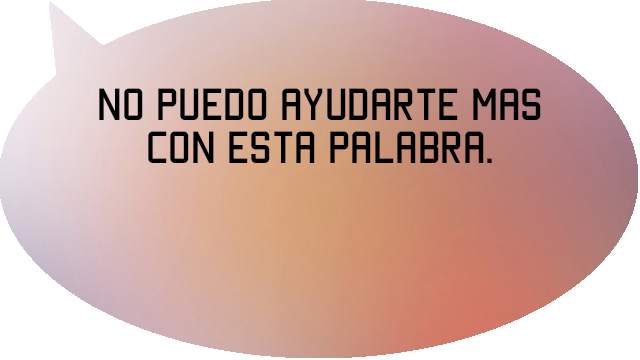
<style>
.page{position:relative;width:640px;height:360px;background:#ffffff}
.page>*{position:absolute;margin:0}
.t1{font:36px "Manteka";color:#000000}
</style>
<div class="page">
<p class="t1" style="left:99px;top:88px;width:442px;height:75px;text-align:center">No puedo ayudarte mas con esta palabra.</p>
</div>
